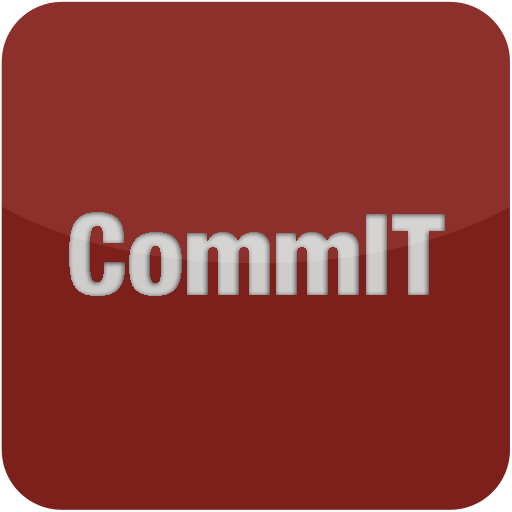
<style>
.page{position:relative;width:512px;height:512px;background:#7d1f1b}
.page>*{position:absolute;margin:0}
.t1{font:114.3px "HelveticaNeue-CondensedBlack";color:#cecdcc}
</style>
<div class="page">
<p class="t1" style="left:69px;top:212px;width:376px;height:84px">CommIT</p>
</div>
